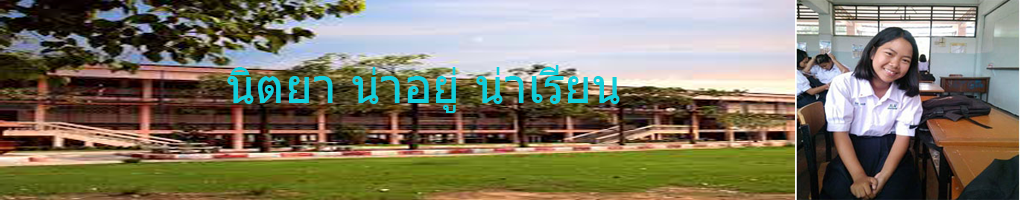
<style>
.page{position:relative;width:1020px;height:200px}
.page>*{position:absolute;margin:0}
.t1{font:48px "Tahoma";color:#11ceda}
.t2{font:36px "Tahoma";color:#000000}
</style>
<div class="page">
<p class="t1" style="left:227px;top:65px;width:393px;height:48px"><span class="t2">                </span>นิตยา น่าอยู่ น่าเรียน</p>
</div>
